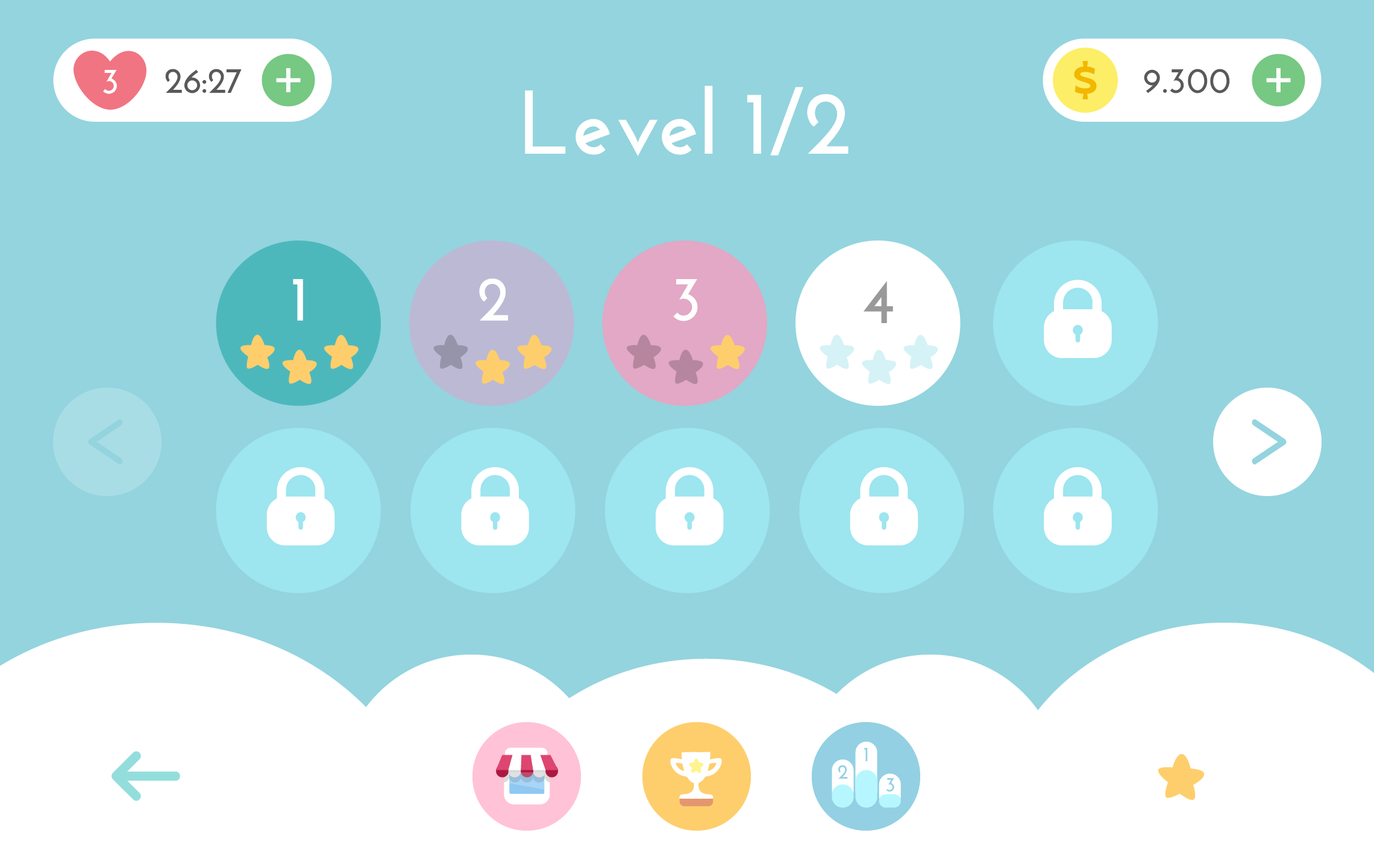
<style>
.page{position:relative;width:1374px;height:868px;background:#93d4de}
.page>*{position:absolute;margin:0}
.t1{font:36.2px "JosefinSans-Bold";color:#ffffff}
.t2{font:36.2px "JosefinSans-Bold";color:#595959}
.t3{font:90.4px "JosefinSans-Bold";color:#ffffff}
.t4{font:63.4px "JosefinSans-Bold";color:#ffffff}
.t5{font:63.4px "JosefinSans-Bold";color:#999999}
</style>
<div class="page">
<p class="t1" style="left:103px;top:70px;width:14px;height:24px">3</p>
<p class="t2" style="left:165px;top:69px;width:77px;height:24px">26:27</p>
<p class="t2" style="left:1144px;top:69px;width:86px;height:24px">9.300</p>
<p class="t3" style="left:525px;top:86px;width:324px;height:70px">Level 1/2</p>
<p class="t4" style="left:293px;top:279px;width:10px;height:42px">1</p>
<p class="t4" style="left:479px;top:278px;width:29px;height:43px">2</p>
<p class="t4" style="left:673px;top:279px;width:25px;height:42px">3</p>
<p class="t5" style="left:864px;top:281px;width:29px;height:42px">4</p>
</div>
